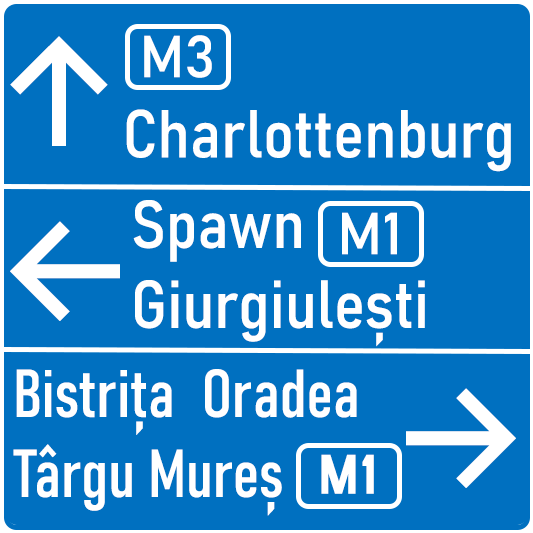
<style>
.page{position:relative;width:533px;height:533px;background:#0070c0}
.page>*{position:absolute;margin:0}
.t1{font:150px "Inter-Medium";color:#ffffff}
.t2{font:58.3px "Bahnschrift";color:#ffffff}
.t3{font:66.7px "Bahnschrift-SemiCondensed";color:#ffffff}
.t4{font:66.7px "Bahnschrift-Condensed";color:#ffffff}
.t5{font:58.3px "SnvD-Regu";color:#ffffff}
</style>
<div class="page">
<p class="t1" style="left:10px;top:36px;width:98px;height:110px">↑</p>
<p class="t2" style="left:144px;top:35px;width:68px;height:43px">M3</p>
<p class="t3" style="left:126px;top:109px;width:385px;height:63px">Charlottenburg</p>
<p class="t3" style="left:133px;top:200px;width:292px;height:147px">Spawn<br>Giurgiulești</p>
<p class="t1" style="left:10px;top:221px;width:110px;height:100px">←</p>
<p class="t2" style="left:342px;top:212px;width:55px;height:43px">M1</p>
<p class="t4" style="left:13px;top:369px;width:344px;height:147px">Bistrița  Oradea<br>Târgu Mureș</p>
<p class="t1" style="left:406px;top:388px;width:110px;height:100px">→</p>
<p class="t5" style="left:321px;top:454px;width:53px;height:40px">M1</p>
</div>
